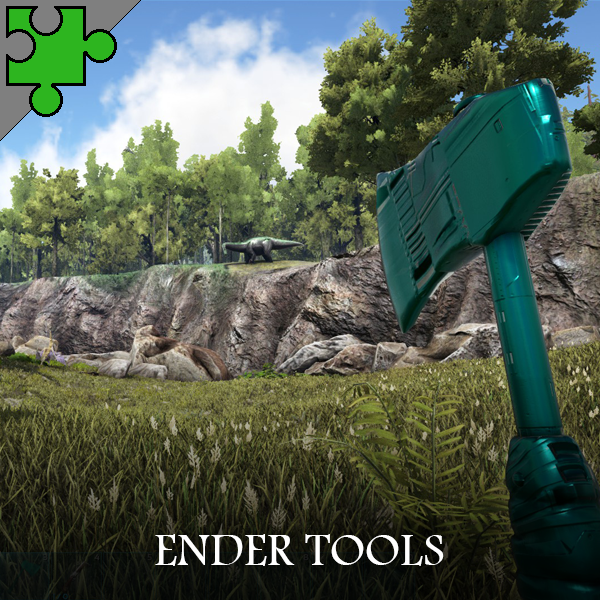
<style>
.page{position:relative;width:600px;height:600px}
.page>*{position:absolute;margin:0}
.t1{font:48px "FootlightMTLight";color:#ffffff}
</style>
<div class="page">
<p class="t1" style="left:155px;top:534px;width:289px;height:32px">ENDER TOOLS</p>
</div>
